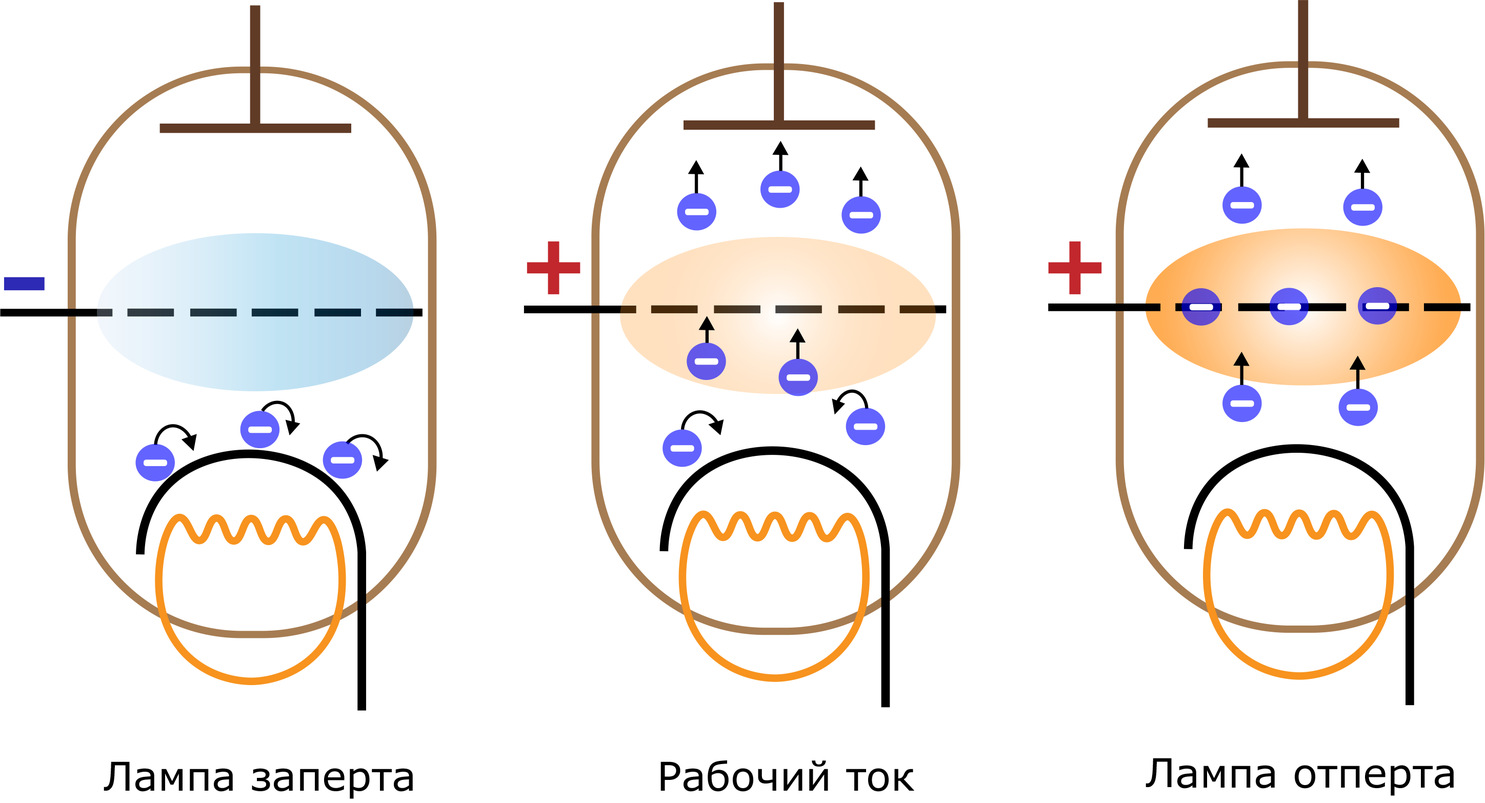
<style>
.page{position:relative;width:1485px;height:803px;background:#ffffff}
.page>*{position:absolute;margin:0}
.t1{font:39.7px "Verdana";color:#000000}
</style>
<div class="page">
<p class="t1" style="left:104px;top:761px;width:309px;height:38px">Лампа заперта</p>
<p class="t1" style="left:660px;top:760px;width:254px;height:32px">Рабочий ток</p>
<p class="t1" style="left:1146px;top:758px;width:308px;height:38px">Лампа отперта</p>
</div>
